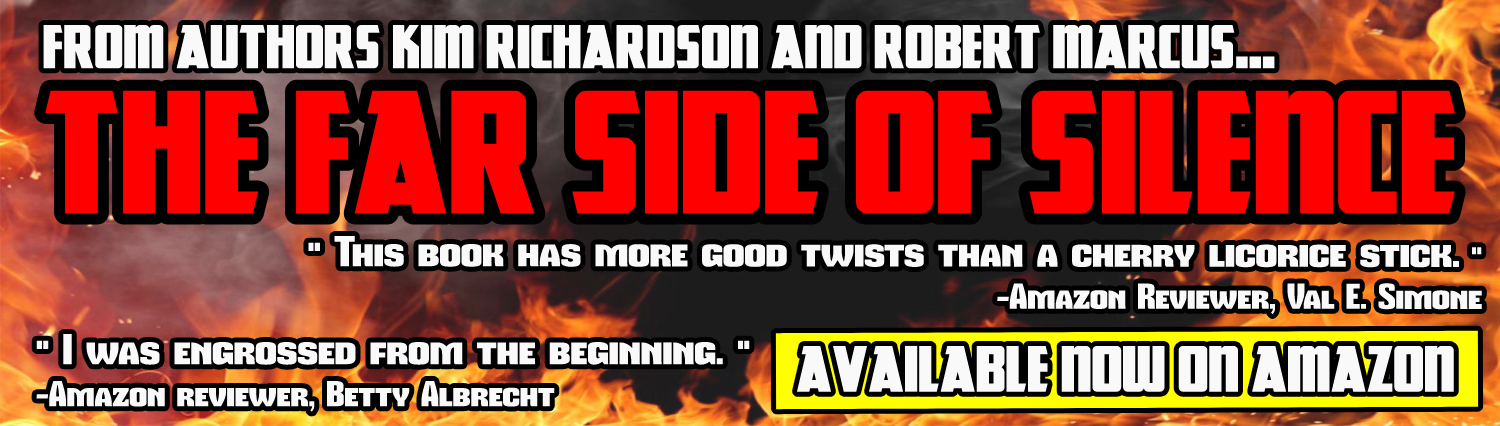
<style>
.page{position:relative;width:1500px;height:426px;background:#000000}
.page>*{position:absolute;margin:0}
.t1{font:51px "GreatLakesNF";color:#f9f9f9}
.t2{font:145px "GreatLakesNF";color:#ff0000}
.t3{font:35px "MikodacsPCS";color:#f9f9f9}
.t4{font:42px "MikodacsPCS";color:#f9f9f9}
.t5{font:42px "MikodacsPCS";color:#ffffff}
.t6{font:35px "MikodacsPCS";color:#ffffff}
.t7{font:54px "GreatLakesNF";color:#f9f9f9}
</style>
<div class="page">
<p class="t1" style="left:43px;top:25px;width:1232px;height:44px">FROM AUTHORS KIM RICHARDSON AND ROBERT MARCUS...</p>
<p class="t2" style="left:45px;top:90px;width:1410px;height:124px">THE FAR SIDE OF SILENCE</p>
<p class="t3" style="left:308px;top:235px;width:1174px;height:80px;text-align:right"><span class="t4">" This book has more good twists than a cherry licorice stick. </span>"                <br>                                                   -Amazon Reviewer, Val E. Simone</p>
<p class="t5" style="left:36px;top:334px;width:714px;height:78px">" I was engrossed from the beginning. "<br><span class="t6">-Amazon reviewer, Betty Albrecht</span></p>
<p class="t7" style="left:796px;top:345px;width:658px;height:47px">AVAILABLE now on amazon</p>
</div>
